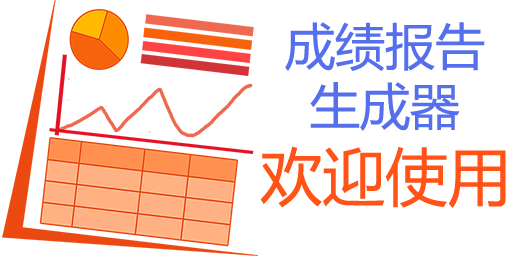
<style>
.page{position:relative;width:512px;height:256px;background:#ffffff}
.page>*{position:absolute;margin:0}
.t1{font:50px "MicrosoftYaHei";color:#566fec}
.t2{font:62.5px "MicrosoftYaHei";color:#ff5317}
</style>
<div class="page">
<p class="t1" style="left:260px;top:22px;width:246px;height:186px;text-align:center">成绩报告<br>生成器<br><span class="t2">欢迎使用</span></p>
</div>
